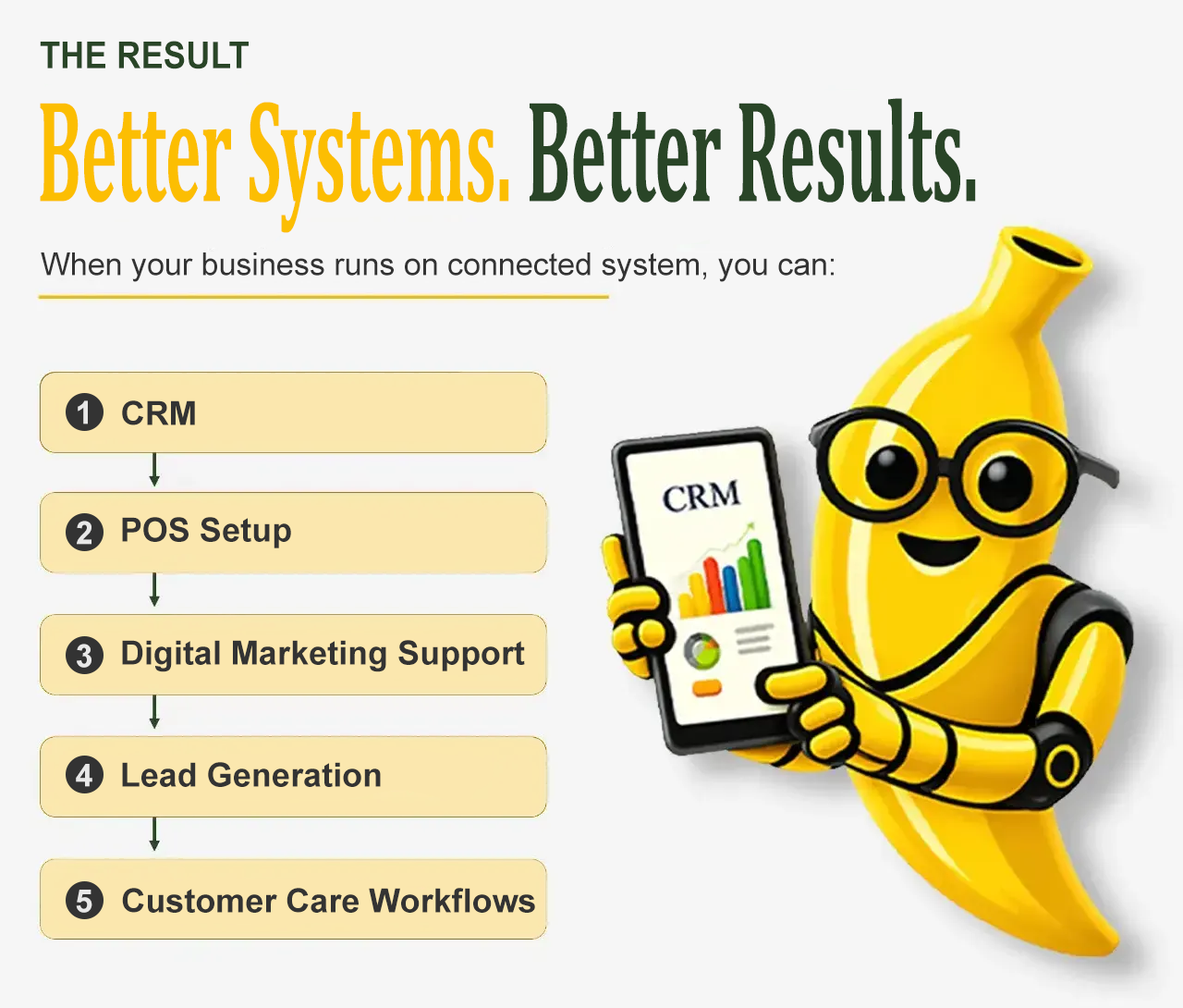
<style>
.page{position:relative;width:1183px;height:1008px;background:#f6f6f6}
.page>*{position:absolute;margin:0}
.t1{font:37px "Arial-BoldMT";color:#294527;scale:0.91 1}
.t2{font:146.8px "Cambria-Bold";color:#fcbe02;scale:0.46 1}
.t3{font:146.8px "Cambria-Bold";color:#294527;scale:0.46 1}
.t4{font:31.4px "ArialMT";color:#333333}
.t5{font:31.4px "Arial-BoldMT";color:#e8e8e8}
.t6{font:33.3px "Arial-BoldMT";color:#333333}
</style>
<div class="page">
<p class="t1" style="left:40px;top:41px;width:209px;height:28px">THE RESULT</p>
<p class="t2" style="left:40px;top:98px;width:936px;height:135px">Better Systems. <span class="t3">Better Results.</span></p>
<p class="t4" style="left:41px;top:252px;width:793px;height:30px">When your business runs on connected system, you can:</p>
<p class="t5" style="left:78px;top:400px;width:10px;height:24px">1</p>
<p class="t6" style="left:122px;top:400px;width:73px;height:25px">CRM</p>
<p class="t5" style="left:77px;top:520px;width:15px;height:25px">2</p>
<p class="t6" style="left:122px;top:517px;width:169px;height:31px">POS Setup</p>
<p class="t6" style="left:122px;top:640px;width:403px;height:32px">Digital Marketing Support</p>
<p class="t5" style="left:77px;top:643px;width:15px;height:24px">3</p>
<p class="t6" style="left:122px;top:762px;width:259px;height:25px">Lead Generation</p>
<p class="t5" style="left:76px;top:764px;width:16px;height:23px">4</p>
<p class="t5" style="left:76px;top:889px;width:16px;height:23px">5</p>
<p class="t6" style="left:122px;top:888px;width:413px;height:24px">Customer Care Workflows</p>
</div>
